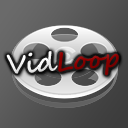
<style>
.page{position:relative;width:128px;height:128px}
.page>*{position:absolute;margin:0}
.t1{font:26px "SegoeScript-Bold";color:#8f0000}
.t2{font:26px "SegoeScript-Bold";color:#ffffff}
</style>
<div class="page">
<p class="t1" style="left:6px;top:51px;width:113px;height:25px;rotate:-4deg"><span class="t2">Vid</span>Loop</p>
</div>
